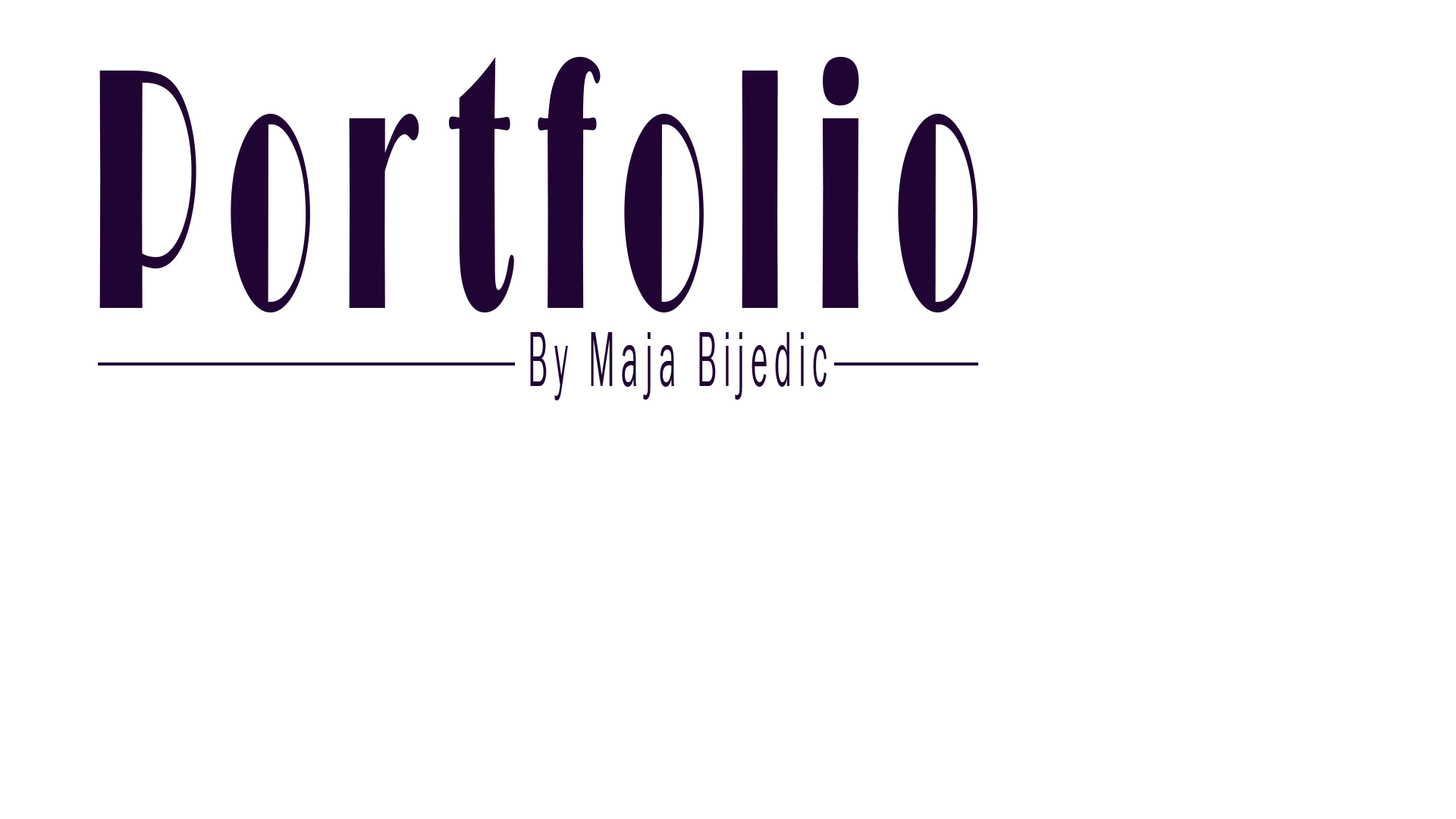
<style>
.page{position:relative;width:1456px;height:819px;background:#ffffff}
.page>*{position:absolute;margin:0}
.t1{font:355.6px "Broadway";letter-spacing:0.2em;color:#200433;scale:0.4 1}
.t2{font:81.1px "FranklinGothic-Book";letter-spacing:0.2em;color:#200433;scale:0.4 1}
</style>
<div class="page">
<p class="t1" style="left:99px;top:57px;width:878px;height:255px">Portfolio</p>
<p class="t2" style="left:530px;top:332px;width:297px;height:68px">By Maja Bijedic</p>
</div>
